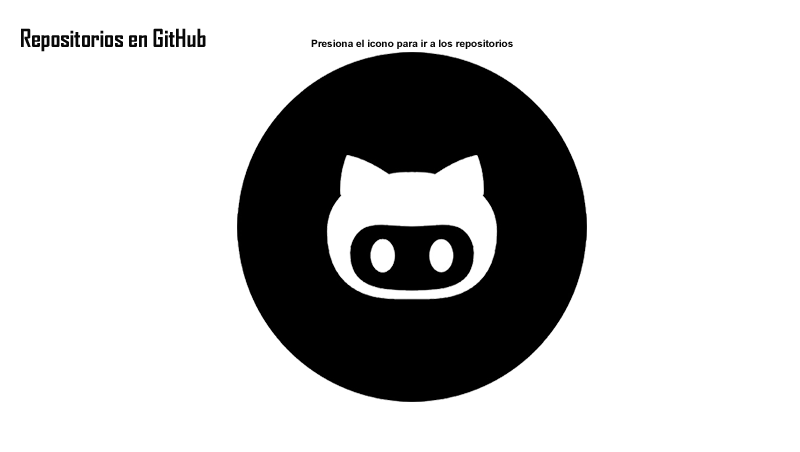
<style>
.page{position:relative;width:800px;height:452px;background:#ffffff}
.page>*{position:absolute;margin:0}
.t1{font:24px "AgencyFB-Bold";color:#080808}
.t2{font:10px "Arial-BoldMT";color:#080808}
</style>
<div class="page">
<p class="t1" style="left:21px;top:28px;width:185px;height:24px">Repositorios en GitHub</p>
<p class="t2" style="left:311px;top:39px;width:202px;height:10px">Presiona el icono para ir a los repositorios</p>
</div>
